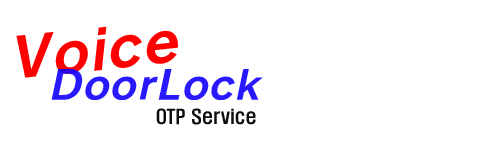
<style>
.page{position:relative;width:500px;height:150px;background:#ffffff}
.page>*{position:absolute;margin:0}
.t1{font:55px "Yj-TEUNTEUN--Bold";color:#ff0000;font-style:italic;scale:1.2 1}
.t2{font:40px "Yj-TEUNTEUN--Bold";color:#2919ff;font-style:italic;scale:1.2 1}
.t3{font:18px "H2hdrM";color:#000000}
.t4{font:24px "H2gsrB";color:#000000;font-style:italic;scale:1.2 1}
</style>
<div class="page">
<p class="t1" style="left:16px;top:26px;width:162px;height:52px;rotate:-6deg">Voice</p>
<p class="t2" style="left:51px;top:69px;width:212px;height:31px">DoorLock</p>
<p class="t3" style="left:156px;top:108px;width:100px;height:17px;opacity:0.95"><span class="t4"><br></span>OTP Service</p>
</div>
